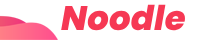
<style>
.page{position:relative;width:200px;height:40px;background:#ffffff}
.page>*{position:absolute;margin:0}
.t1{font:34px "Poppins-ExtraBoldItalic";letter-spacing:0.005em;color:#f63854}
</style>
<div class="page">
<p class="t1" style="left:61px;top:4px;width:125px;height:27px">Noodle</p>
</div>
